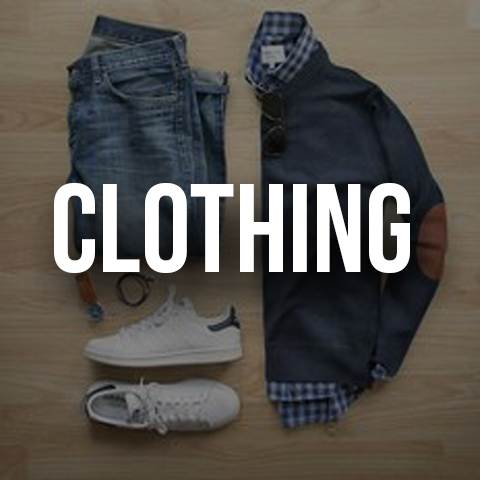
<style>
.page{position:relative;width:480px;height:480px}
.page>*{position:absolute;margin:0}
.t1{font:125px "BebasNeue";color:#ffffff}
</style>
<div class="page">
<p class="t1" style="left:54px;top:183px;width:356px;height:90px">clothing</p>
</div>
